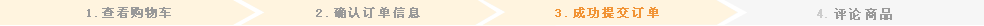
<style>
.page{position:relative;width:984px;height:26px;background:#fff4df}
.page>*{position:absolute;margin:0}
.t1{font:12px "SimSun";letter-spacing:0.1em;color:#999999;font-weight:bold}
.t2{font:12px "SimSun";letter-spacing:0.15em;color:#999999;font-weight:bold}
.t3{font:12px "SimSun";letter-spacing:0.15em;color:#f19436;font-weight:bold}
</style>
<div class="page">
<p class="t1" style="left:87px;top:7px;width:84px;height:11px">1.查看购物车</p>
<p class="t2" style="left:316px;top:7px;width:104px;height:11px">2.确认订单信息</p>
<p class="t3" style="left:555px;top:7px;width:104px;height:11px">3.成功提交订单</p>
</div>
